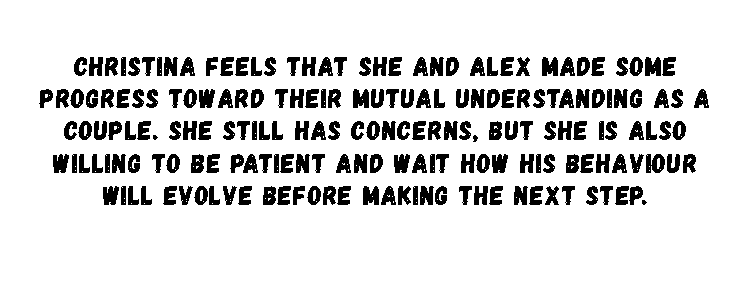
<style>
.page{position:relative;width:750px;height:282px;background:#ffffff}
.page>*{position:absolute;margin:0}
.t1{font:27px "Gagalin-Regular";letter-spacing:0.038em;color:#000000}
</style>
<div class="page">
<p class="t1" style="left:39px;top:57px;width:670px;height:148px;text-align:center">Christina feels that she and Alex made some <br>progress toward their mutual understanding as a couple. She still has concerns, but she is also willing to be patient and wait how his behaviour will evolve before making the next step.</p>
</div>
